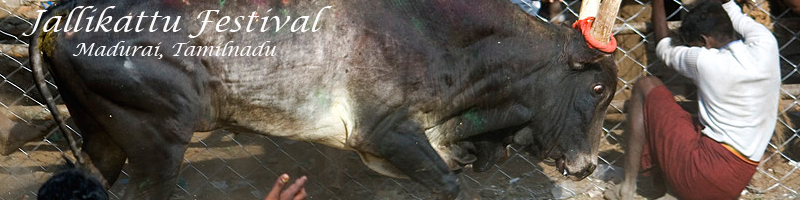
<style>
.page{position:relative;width:800px;height:200px}
.page>*{position:absolute;margin:0}
.t1{font:30px/8px "LucidaCalligraphy-Italic";color:#ffffff;font-style:italic}
.t2{font:18px/8px "LucidaCalligraphy-Italic";color:#ffffff;font-style:italic}
</style>
<div class="page">
<p class="t1" style="left:22px;top:6px;width:310px;height:53px;opacity:0.97">Jallikattu Festival<br><br><br><span class="t2">        Madurai, Tamilnadu</span></p>
</div>
